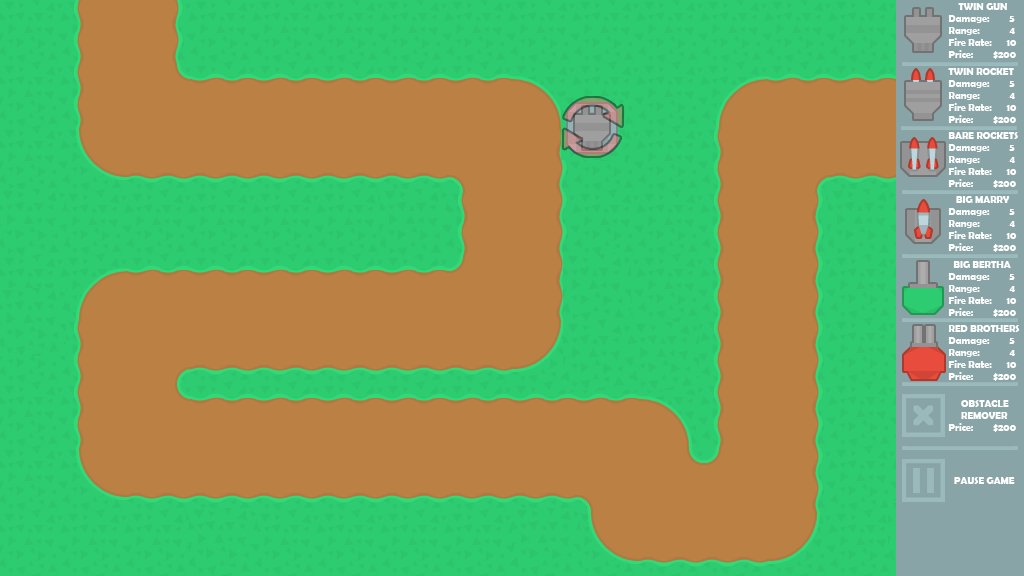
<style>
.page{position:relative;width:1024px;height:576px;background:#bb8044}
.page>*{position:absolute;margin:0}
.t1{font:10px "BerlinSansFBDemi-Bold";color:#ffffff}
</style>
<div class="page">
<p class="t1" style="left:948px;top:3px;width:69px;height:56px">TWIN GUN<br>Damage:        5<br>Range:           4<br>Fire Rate:      10<br>Price:        $200</p>
<p class="t1" style="left:948px;top:68px;width:69px;height:56px">TWIN ROCKET<br>Damage:        5<br>Range:           4<br>Fire Rate:      10<br>Price:        $200</p>
<p class="t1" style="left:948px;top:132px;width:70px;height:56px">BARE ROCKETS<br>Damage:        5<br>Range:           4<br>Fire Rate:      10<br>Price:        $200</p>
<p class="t1" style="left:948px;top:196px;width:69px;height:56px">BIG MARRY<br>Damage:        5<br>Range:           4<br>Fire Rate:      10<br>Price:        $200</p>
<p class="t1" style="left:948px;top:261px;width:69px;height:56px">BIG BERTHA<br>Damage:        5<br>Range:           4<br>Fire Rate:      10<br>Price:        $200</p>
<p class="t1" style="left:948px;top:325px;width:72px;height:56px">RED BROTHERS<br>Damage:        5<br>Range:           4<br>Fire Rate:      10<br>Price:        $200</p>
<p class="t1" style="left:948px;top:400px;width:68px;height:32px">OBSTACLE<br>     REMOVER<br>Price:        $200</p>
</div>
